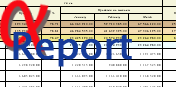
<style>
.page{position:relative;width:176px;height:87px;background:#ffffff}
.page>*{position:absolute;margin:0}
.t1{font:38px "LucidaSansUnicode";letter-spacing:-0.025em;color:#163b99;font-weight:bold}
</style>
<div class="page">
<p class="t1" style="left:13px;top:32px;width:119px;height:35px">Report</p>
</div>
